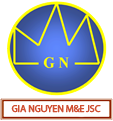
<style>
.page{position:relative;width:113px;height:121px;background:#ffffff}
.page>*{position:absolute;margin:0}
.t1{font:10.4px "MyriadPro-Regular";letter-spacing:-0.04em;color:#cf4f32;font-weight:bold;scale:0.96 1}
</style>
<div class="page">
<p class="t1" style="left:11px;top:105px;width:90px;height:8px">GIA NGUYEN M&amp;E JSC</p>
</div>
